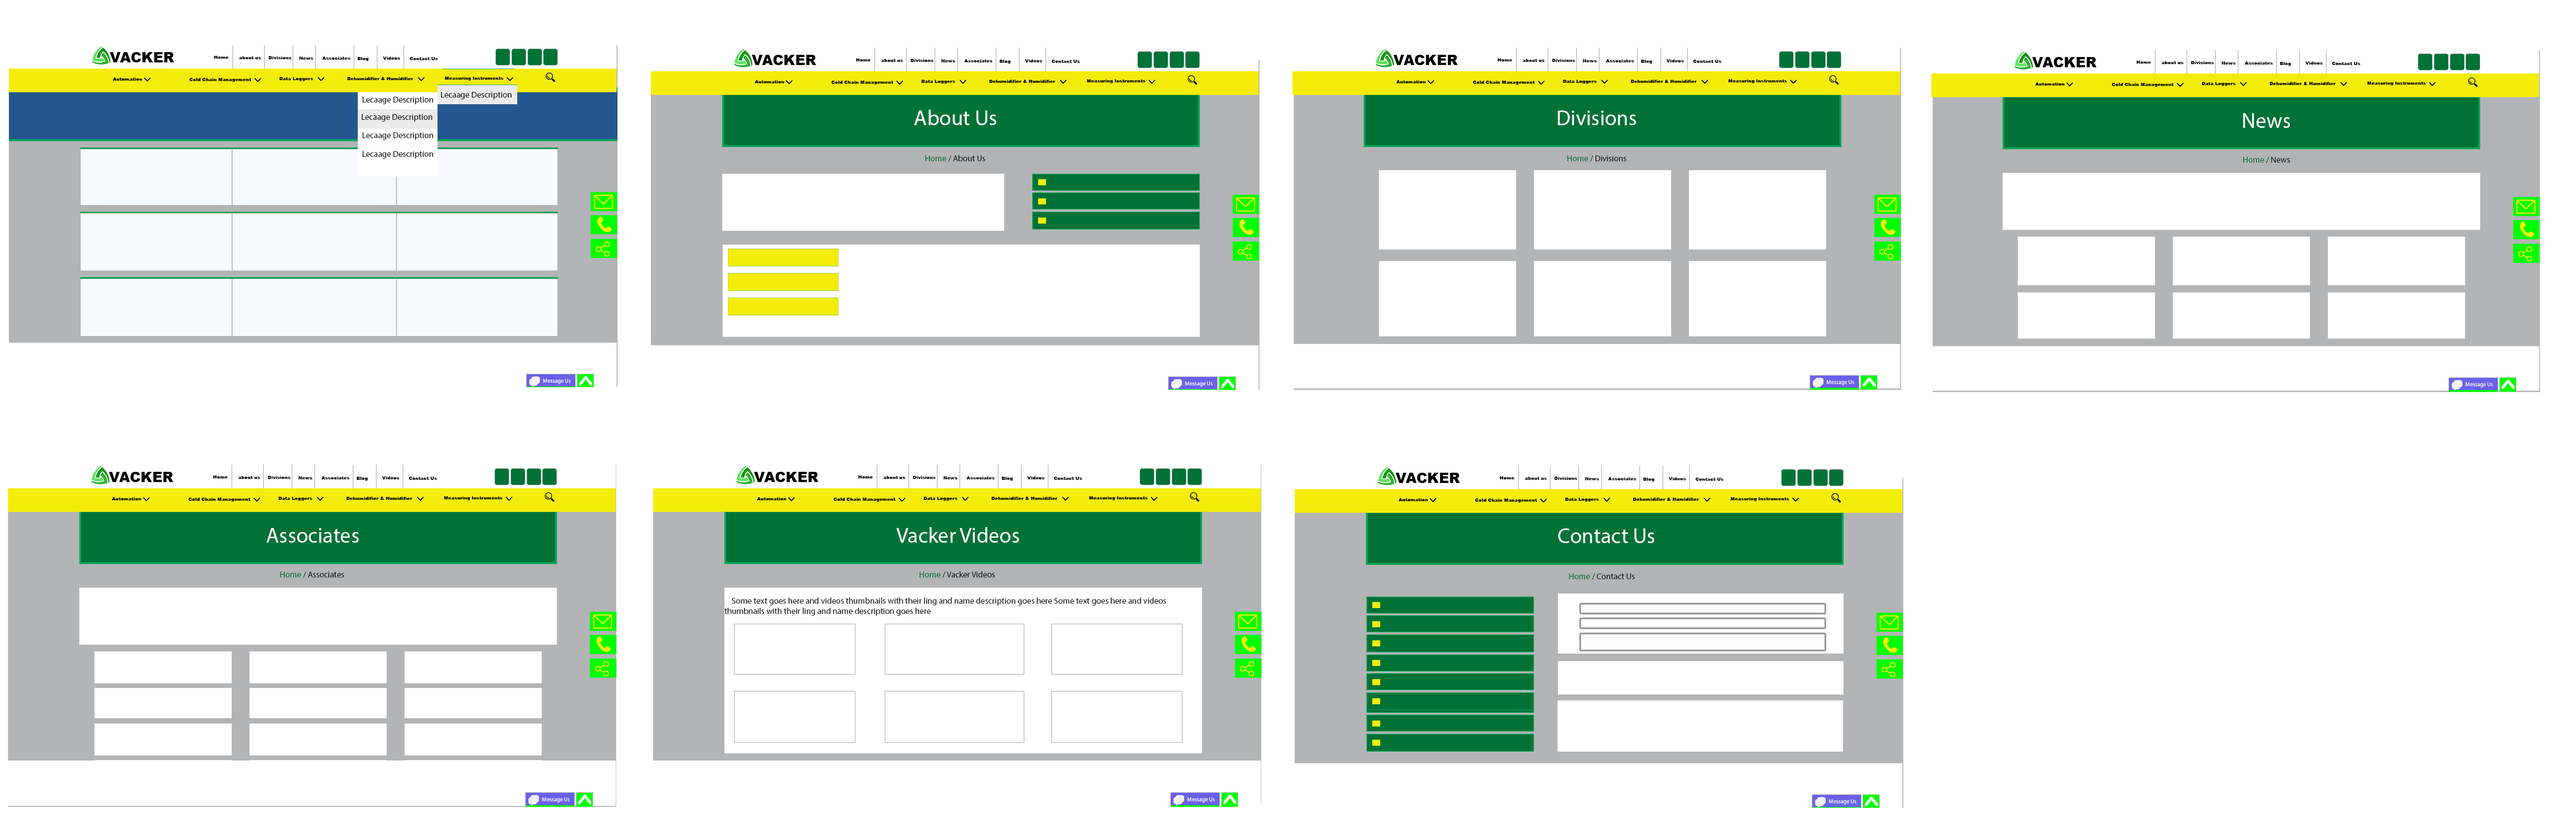
<style>
.page{position:relative;width:2576px;height:818px;background:#ffffff}
.page>*{position:absolute;margin:0}
.t1{font:21.6px "MyriadPro-Regular";color:#ffffff}
.t2{font:8.5px "MyriadPro-Regular";color:#0c0c0c}
.t3{font:8.5px "MyriadPro-Regular";color:#007236}
</style>
<div class="page">
<p class="t1" style="left:914px;top:110px;width:82px;height:15px">About Us</p>
<p class="t1" style="left:1558px;top:110px;width:78px;height:15px">Divisions</p>
<p class="t1" style="left:2243px;top:113px;width:47px;height:15px">News</p>
<p class="t2" style="left:925px;top:155px;width:60px;height:7px"><span class="t3">Home </span>/ About Us</p>
<p class="t2" style="left:1567px;top:155px;width:59px;height:7px"><span class="t3">Home </span>/ Divisions</p>
<p class="t2" style="left:2243px;top:157px;width:47px;height:6px"><span class="t3">Home </span>/ News</p>
<p class="t1" style="left:266px;top:528px;width:93px;height:15px">Associates</p>
<p class="t1" style="left:896px;top:527px;width:123px;height:16px">Vacker Videos</p>
<p class="t1" style="left:1558px;top:528px;width:96px;height:15px">Contact Us</p>
<p class="t2" style="left:280px;top:572px;width:64px;height:6px"><span class="t3">Home </span>/ Associates</p>
<p class="t2" style="left:920px;top:571px;width:75px;height:7px"><span class="t3">Home </span>/ Vacker Videos</p>
<p class="t2" style="left:1569px;top:573px;width:66px;height:7px"><span class="t3">Home </span>/ Contact Us</p>
<p class="t2" style="left:724px;top:597px;width:442px;height:19px">Some text goes here and videos thumbnails with their ling and name description goes here Some text goes here and videos thumbnails with their ling and name description goes here</p>
</div>
